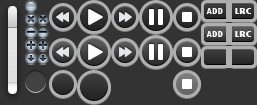
<style>
.page{position:relative;width:257px;height:105px;background:#333333}
.page>*{position:absolute;margin:0}
.t1{font:9.4px "TwCenMT-CondensedExtraBold";color:#feffff;scale:1.1 1}
.t2{font:9.4px "TwCenMT-CondensedExtraBold";color:#feffff;scale:1.34 1}
</style>
<div class="page">
<p class="t1" style="left:206px;top:8px;width:17px;height:6px">ADD</p>
<p class="t2" style="left:235px;top:8px;width:16px;height:6px">LRC</p>
<p class="t1" style="left:206px;top:31px;width:17px;height:6px">ADD</p>
<p class="t2" style="left:235px;top:31px;width:16px;height:6px">LRC</p>
</div>
